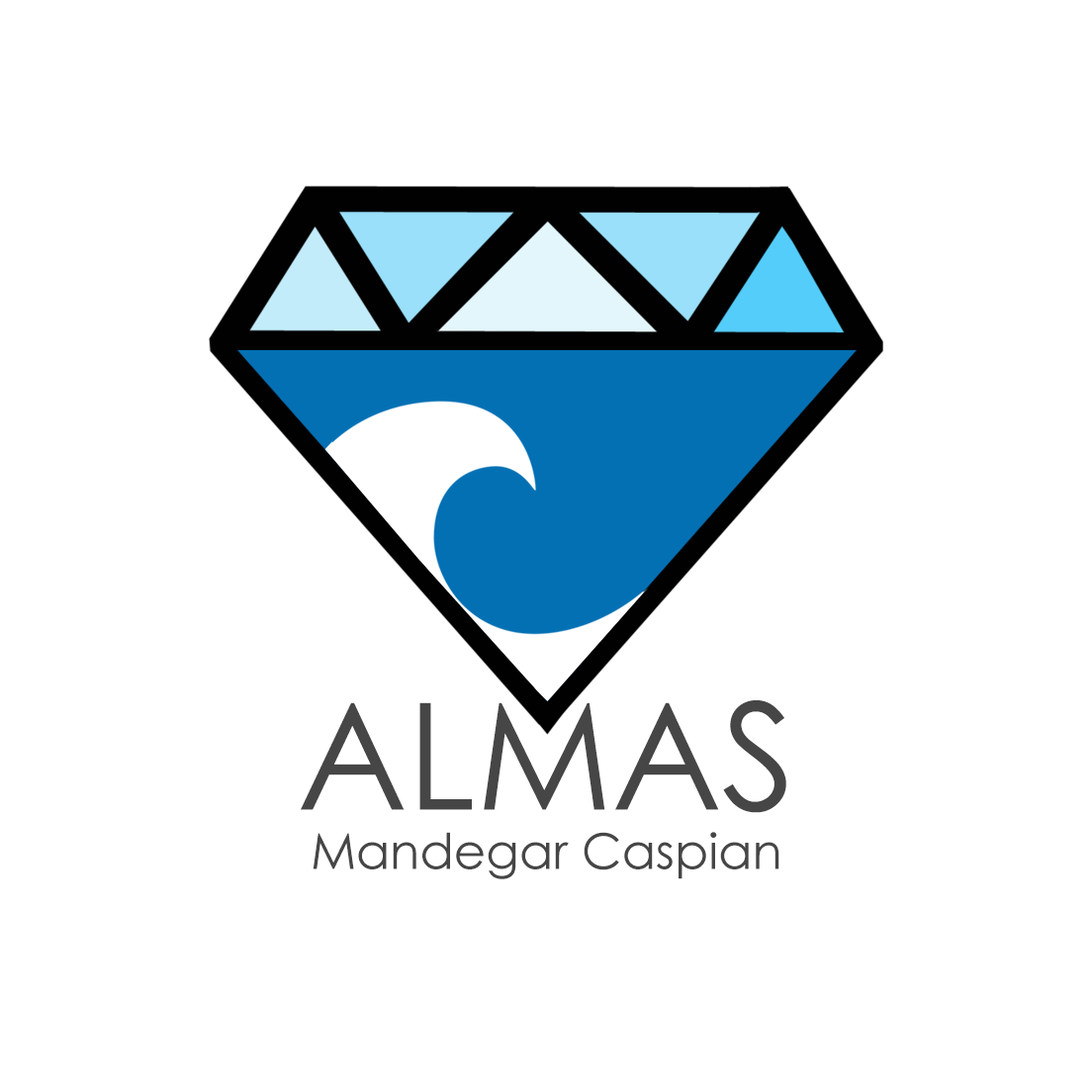
<style>
.page{position:relative;width:1092px;height:1092px;background:#ffffff}
.page>*{position:absolute;margin:0}
.t1{font:49.5px "CenturyGothic";color:#464646}
.t2{font:148.4px "CenturyGothic";color:#464646}
</style>
<div class="page">
<p class="t1" style="left:301px;top:700px;width:485px;height:179px;text-align:center"><span class="t2">ALMAS<br></span>Mandegar Caspian</p>
</div>
